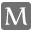
<style>
.page{position:relative;width:32px;height:32px;background:#707070}
.page>*{position:absolute;margin:0}
.t1{font:24px "Catull-Regular";color:#ffffff;scale:0.9 1}
</style>
<div class="page">
<p class="t1" style="left:5px;top:7px;width:23px;height:18px">M</p>
</div>
